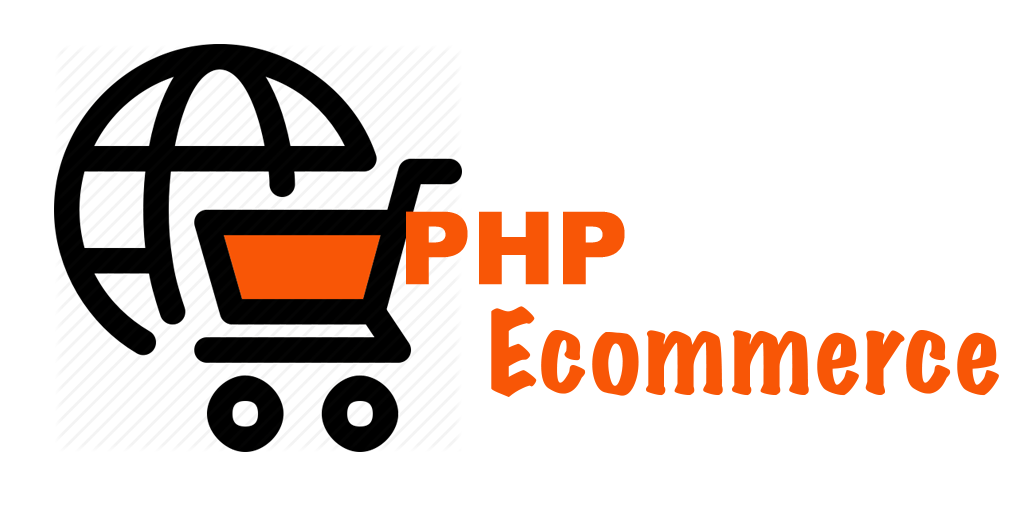
<style>
.page{position:relative;width:1030px;height:512px;background:#ffffff}
.page>*{position:absolute;margin:0}
.t1{font:101px "Arial-Black";color:#f85606}
.t2{font:102px "MarkerFelt-Wide";color:#f85606}
</style>
<div class="page">
<p class="t1" style="left:406px;top:211px;width:219px;height:74px">PHP</p>
<p class="t2" style="left:491px;top:306px;width:508px;height:91px">Ecommerce</p>
</div>
